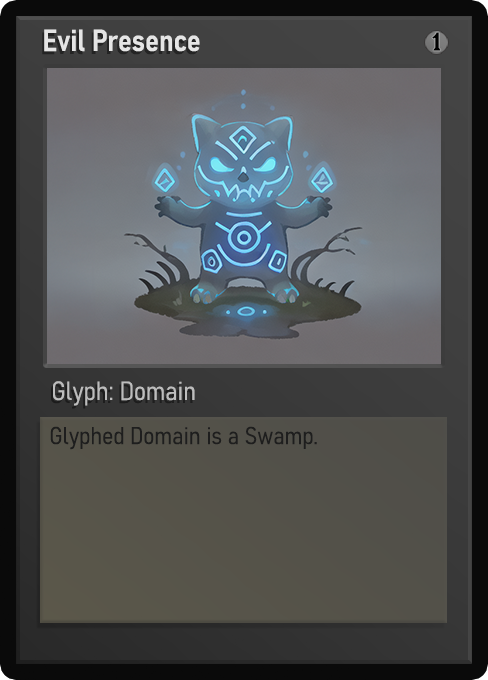
<style>
.page{position:relative;width:488px;height:680px}
.page>*{position:absolute;margin:0}
.t1{font:30px "Bahnschrift-SemiBoldSemiCondensed";color:#f2f2f2;font-weight:bold}
.t2{font:25px "WTRRoycroft";color:#000000;font-weight:bold;scale:1.09 1}
.t3{font:26px "Bahnschrift-LightSemiCondensed";color:#c8c8c8;font-weight:bold}
.t4{font:24px "Bahnschrift-LightSemiCondensed";color:#1e1e1e;font-weight:bold}
</style>
<div class="page">
<p class="t1" style="left:44px;top:29px;width:156px;height:23px;opacity:0.9">Evil Presence</p>
<p class="t2" style="left:432px;top:32px;width:9px;height:19px">1</p>
<p class="t3" style="left:53px;top:381px;width:142px;height:25px;opacity:0.9">Glyph: Domain</p>
<p class="t4" style="left:50px;top:426px;width:267px;height:24px">Glyphed Domain is a Swamp.</p>
</div>
